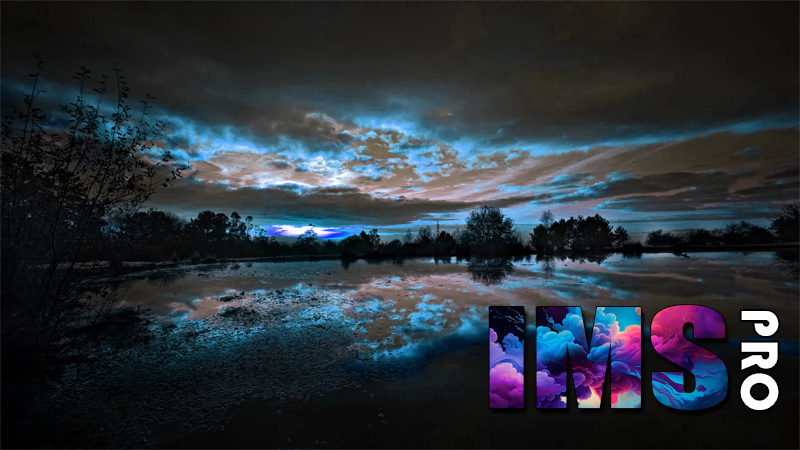
<style>
.page{position:relative;width:800px;height:450px}
.page>*{position:absolute;margin:0}
.t1{font:127.7px "Impact";scale:1.28 1}
.t2{font:56.5px "Bauhaus93";color:#fefeff}
</style>
<div class="page">
<p class="t1" style="left:489px;top:305px;width:239px;height:105px">IMS</p>
<p class="t2" style="left:739px;top:310px;width:41px;height:101px;rotate:90deg">PRO</p>
</div>
